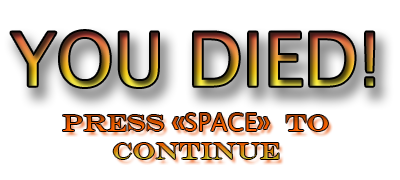
<style>
.page{position:relative;width:400px;height:180px;background:#ffffff}
.page>*{position:absolute;margin:0}
.t1{font:73.3px "LucidaSansUnicode"}
.t2{font:24px "EngraversMT"}
.t3{font:24px "LucidaSans"}
</style>
<div class="page">
<p class="t1" style="left:11px;top:31px;width:363px;height:56px">YOU DIED!</p>
<p class="t2" style="left:63px;top:113px;width:265px;height:46px;text-align:center">Press «<span class="t3">SPACE</span>»  to Continue</p>
</div>
